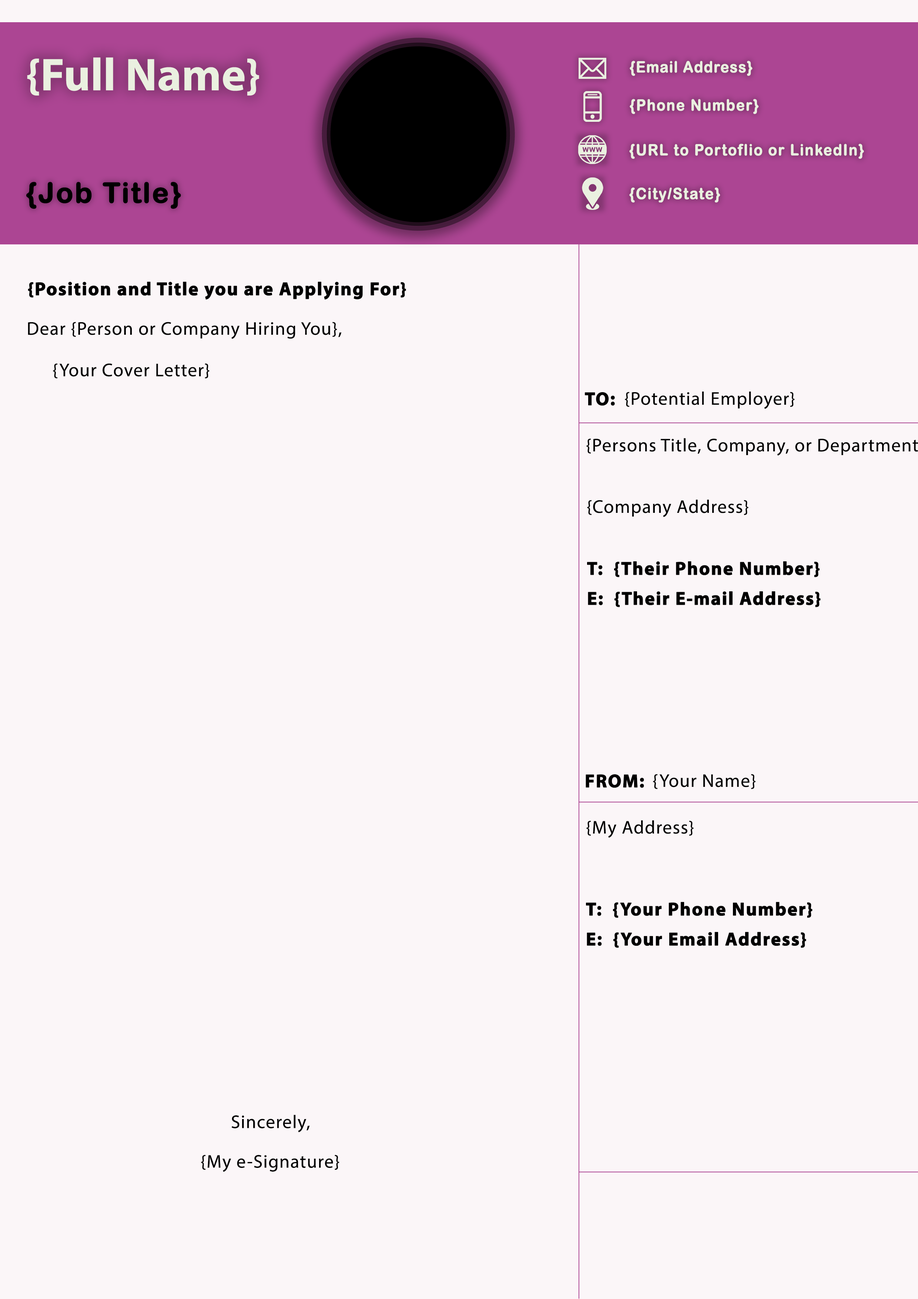
<style>
.page{position:relative;width:918px;height:1299px;background:#fbf6f8}
.page>*{position:absolute;margin:0}
.t1{font:46.3px "MyriadPro-Bold";color:#eaf0e0}
.t2{font:15.4px "ArialRoundedMTBold";letter-spacing:0.03em;color:#eaf0e0;font-weight:bold;scale:0.93 1}
.t3{font:15.4px "ArialRoundedMTBold";letter-spacing:0.05em;color:#eaf0e0;font-weight:bold;scale:0.93 1}
.t4{font:27.8px "ArialRoundedMTBold";letter-spacing:0.04em;color:#000000;font-weight:bold}
.t5{font:18.5px "MyriadPro-Bold";letter-spacing:0.04em;color:#000000;font-weight:bold}
.t6{font:18.5px "MyriadPro-Regular";letter-spacing:0.04em;color:#000000}
</style>
<div class="page">
<p class="t1" style="left:27px;top:57px;width:232px;height:39px">{Full Name}</p>
<p class="t2" style="left:630px;top:61px;width:123px;height:15px">{Email Address}</p>
<p class="t3" style="left:630px;top:99px;width:129px;height:15px">{Phone Number}</p>
<p class="t3" style="left:629px;top:144px;width:235px;height:15px">{URL to Portoflio or LinkedIn}</p>
<p class="t4" style="left:26px;top:182px;width:155px;height:27px">{Job Title}</p>
<p class="t3" style="left:629px;top:187px;width:91px;height:16px">{City/State}</p>
<p class="t5" style="left:28px;top:281px;width:378px;height:19px">{Position and Title you are Applying For}</p>
<p class="t6" style="left:28px;top:322px;width:314px;height:17px">Dear {Person or Company Hiring You},</p>
<p class="t6" style="left:53px;top:363px;width:157px;height:15px">{Your Cover Letter}</p>
<p class="t5" style="left:585px;top:392px;width:30px;height:14px">TO:</p>
<p class="t6" style="left:625px;top:391px;width:170px;height:18px">{Potential Employer}</p>
<p class="t6" style="left:587px;top:499px;width:162px;height:18px">{Company Address}</p>
<p class="t5" style="left:587px;top:561px;width:233px;height:16px">T:  {Their Phone Number}</p>
<p class="t5" style="left:588px;top:591px;width:233px;height:16px">E:  {Their E-mail Address}</p>
<p class="t6" style="left:653px;top:774px;width:103px;height:15px">{Your Name}</p>
<p class="t5" style="left:586px;top:774px;width:58px;height:14px">FROM:</p>
<p class="t6" style="left:586px;top:820px;width:108px;height:18px">{My Address}</p>
<p class="t5" style="left:586px;top:901px;width:227px;height:17px">T:  {Your Phone Number}</p>
<p class="t5" style="left:587px;top:931px;width:219px;height:17px">E:  {Your Email Address}</p>
<p class="t6" style="left:232px;top:1114px;width:78px;height:18px">Sincerely,</p>
<p class="t6" style="left:201px;top:1155px;width:138px;height:17px">{My e-Signature}</p>
</div>
